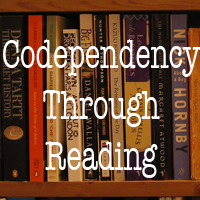
<style>
.page{position:relative;width:200px;height:200px}
.page>*{position:absolute;margin:0}
.t1{font:42.7px "AmericanTypewriter";color:#ffffff;scale:0.67 1}
</style>
<div class="page">
<p class="t1" style="left:3px;top:39px;width:198px;height:139px;text-align:center">Codependency<br>Through<br>Reading</p>
</div>
